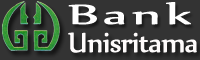
<style>
.page{position:relative;width:200px;height:60px;background:#333333}
.page>*{position:absolute;margin:0}
.t1{font:33.3px "Nyala-Regular";letter-spacing:0.05em;color:#fefefe;font-weight:bold;scale:1.83 1}
.t2{font:33.3px "Nyala-Regular";letter-spacing:-0.04em;color:#fefbfb;font-weight:bold}
</style>
<div class="page">
<p class="t1" style="left:68px;top:2px;width:123px;height:23px">Bank</p>
<p class="t2" style="left:68px;top:32px;width:129px;height:21px">Unisritama</p>
</div>
